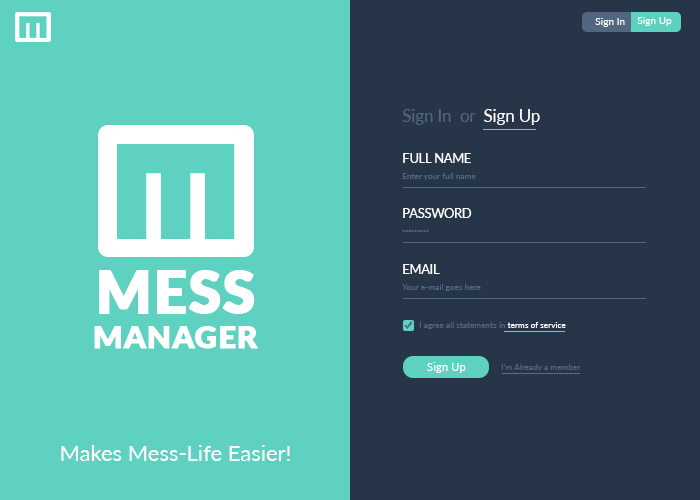
<style>
.page{position:relative;width:700px;height:500px;background:#273548}
.page>*{position:absolute;margin:0}
.t1{font:10.2px "Lato-Regular";color:#ffffff}
.t2{font:16.7px "Lato-Regular";color:#526680}
.t3{font:16.7px "Lato-Regular";color:#ffffff}
.t4{font:150px "QuiFinn";color:#5fd1c0}
.t5{font:12.5px "Lato-Regular";color:#ffffff}
.t6{font:8.3px "Lato-Regular";color:#526680}
.t7{font:8.3px "TimesNewRomanPSMT";color:#526680}
.t8{font:31.4px/35.1px "Lato-Black";color:#ffffff;text-transform:uppercase;font-weight:bold}
.t9{font:58.5px/35.1px "Lato-Black";color:#ffffff;text-transform:uppercase;font-weight:bold}
.t10{font:8.3px "Lato-Regular";color:#ffffff}
.t11{font:11.5px "Lato-Regular";color:#ffffff}
.t12{font:22px "Lato-Regular";color:#ffffff}
</style>
<div class="page">
<p class="t1" style="left:637px;top:17px;width:35px;height:9px">Sign Up</p>
<p class="t1" style="left:595px;top:18px;width:30px;height:9px">Sign In</p>
<p class="t2" style="left:402px;top:109px;width:138px;height:16px">Sign In  or  <span class="t3">Sign Up</span></p>
<p class="t4" style="left:117px;top:144px;width:118px;height:95px">M</p>
<p class="t5" style="left:403px;top:153px;width:68px;height:10px">FULL NAME</p>
<p class="t6" style="left:402px;top:173px;width:74px;height:7px">Enter your full name</p>
<p class="t5" style="left:403px;top:208px;width:69px;height:10px">PASSWORD</p>
<p class="t7" style="left:402px;top:230px;width:27px;height:2px">•••••••••</p>
<p class="t8" style="left:94px;top:270px;width:164px;height:79px;text-align:center"><span class="t9">mess<br></span>manager</p>
<p class="t5" style="left:403px;top:264px;width:37px;height:10px">EMAIL</p>
<p class="t6" style="left:402px;top:284px;width:79px;height:7px">Your e-mail goes here</p>
<p class="t6" style="left:419px;top:322px;width:147px;height:7px">I agree all statements in <span class="t10">terms of service</span></p>
<p class="t11" style="left:427px;top:362px;width:39px;height:11px">Sign Up</p>
<p class="t6" style="left:501px;top:364px;width:80px;height:7px">I’m Already a member</p>
<p class="t12" style="left:61px;top:445px;width:229px;height:16px">Makes Mess-Life Easier!</p>
</div>
